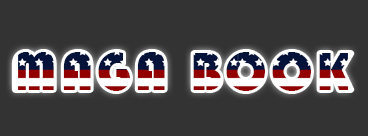
<style>
.page{position:relative;width:368px;height:136px;background:#333333}
.page>*{position:absolute;margin:0}
.t1{font:55.4px "Bauhaus93";letter-spacing:0.075em}
</style>
<div class="page">
<p class="t1" style="left:14px;top:52px;width:338px;height:39px">MAGA BOOK</p>
</div>
